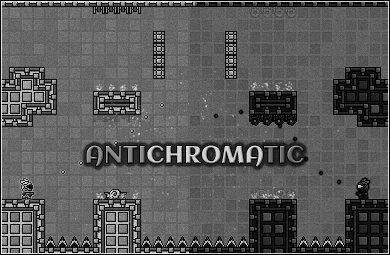
<style>
.page{position:relative;width:390px;height:255px}
.page>*{position:absolute;margin:0}
.t1{font:24px "Aclonica-Regular";color:#d0d0d0}
.t2{font:24px "Aclonica-Regular";color:#888888}
.t3{font:24px "Aclonica-Regular";color:#696969}
</style>
<div class="page">
<p class="t1" style="left:86px;top:145px;width:218px;height:22px"><span class="t2">ANTI</span>CHROMA<span class="t3">TIC</span></p>
</div>
